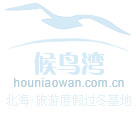
<style>
.page{position:relative;width:136px;height:118px;background:#ffffff}
.page>*{position:absolute;margin:0}
.t1{font:24px "FZCQJW--GB1-0";color:#d4eaf6}
.t2{font:12px "ArialMT";color:#b3ccda}
.t3{font:12px "SimSun";color:#e4f1f8}
.t4{font:14px "MicrosoftYaHei";color:#e4f1f8}
</style>
<div class="page">
<p class="t1" style="left:33px;top:52px;width:72px;height:23px">候鸟湾</p>
<p class="t2" style="left:14px;top:78px;width:110px;height:9px">houniaowan.com.cn</p>
<p class="t3" style="left:6px;top:94px;width:23px;height:12px">北海</p>
<p class="t4" style="left:31px;top:99px;width:3px;height:2px">.</p>
<p class="t3" style="left:36px;top:94px;width:95px;height:12px">旅游度假过冬基地</p>
</div>
